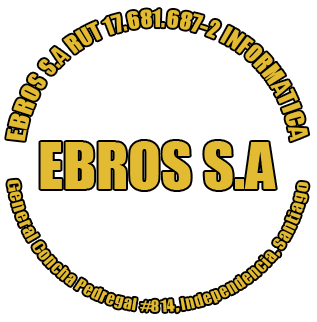
<style>
.page{position:relative;width:317px;height:322px;background:#ffffff}
.page>*{position:absolute;margin:0}
.t1{font:16px "Impact";color:#e3bb33}
.t2{font:12px "Impact";color:#e3bb33}
</style>
<div class="page">
<p class="t1" style="left:6px;top:9px;width:303px;height:133px">EBROS S.A RUT 17.681.687-2 INFORMATICA</p>
<p class="t2" style="left:7px;top:179px;width:302px;height:134px">General Concha Pedregal #814, Independencia, Santiago</p>
</div>
